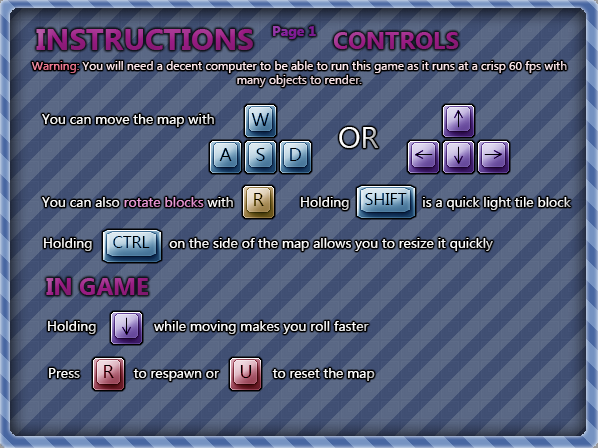
<style>
.page{position:relative;width:598px;height:448px}
.page>*{position:absolute;margin:0}
.t1{font:30px "Ebrima-Bold";color:#9b1d85}
.t2{font:14px "Ebrima-Bold";color:#851d9b}
.t3{font:24px "Ebrima-Bold";color:#9b1d85}
.t4{font:12px "Ebrima";color:#ffe8ed}
.t5{font:12px "Ebrima";color:#f47892}
.t6{font:14px "Ebrima";color:#ffffff}
.t7{font:30px "Ebrima";color:#ffffff}
.t8{font:14px "Ebrima";color:#ea95d5}
</style>
<div class="page">
<p class="t1" style="left:36px;top:29px;width:217px;height:21px">INSTRUCTIONS</p>
<p class="t2" style="left:273px;top:26px;width:43px;height:13px">Page 1</p>
<p class="t3" style="left:334px;top:32px;width:125px;height:17px">CONTROLS</p>
<p class="t4" style="left:31px;top:61px;width:536px;height:26px;text-align:center"><span class="t5">Warning: </span>You will need a decent computer to be able to run this game as it runs at a crisp 60 fps with many objects to render.</p>
<p class="t6" style="left:42px;top:114px;width:172px;height:13px">You can move the map with</p>
<p class="t7" style="left:339px;top:127px;width:40px;height:21px">OR</p>
<p class="t8" style="left:42px;top:197px;width:191px;height:10px"><span class="t6">You can also </span>rotate blocks <span class="t6">with</span></p>
<p class="t6" style="left:301px;top:197px;width:270px;height:13px">Holding                   is a quick light tile block</p>
<p class="t6" style="left:44px;top:238px;width:449px;height:13px">Holding                    on the side of the map allows you to resize it quickly</p>
<p class="t3" style="left:46px;top:278px;width:102px;height:17px">IN GAME</p>
<p class="t6" style="left:48px;top:321px;width:321px;height:13px">Holding               while moving makes you roll faster</p>
<p class="t6" style="left:49px;top:368px;width:326px;height:13px">Press              to respawn or              to reset the map</p>
</div>
